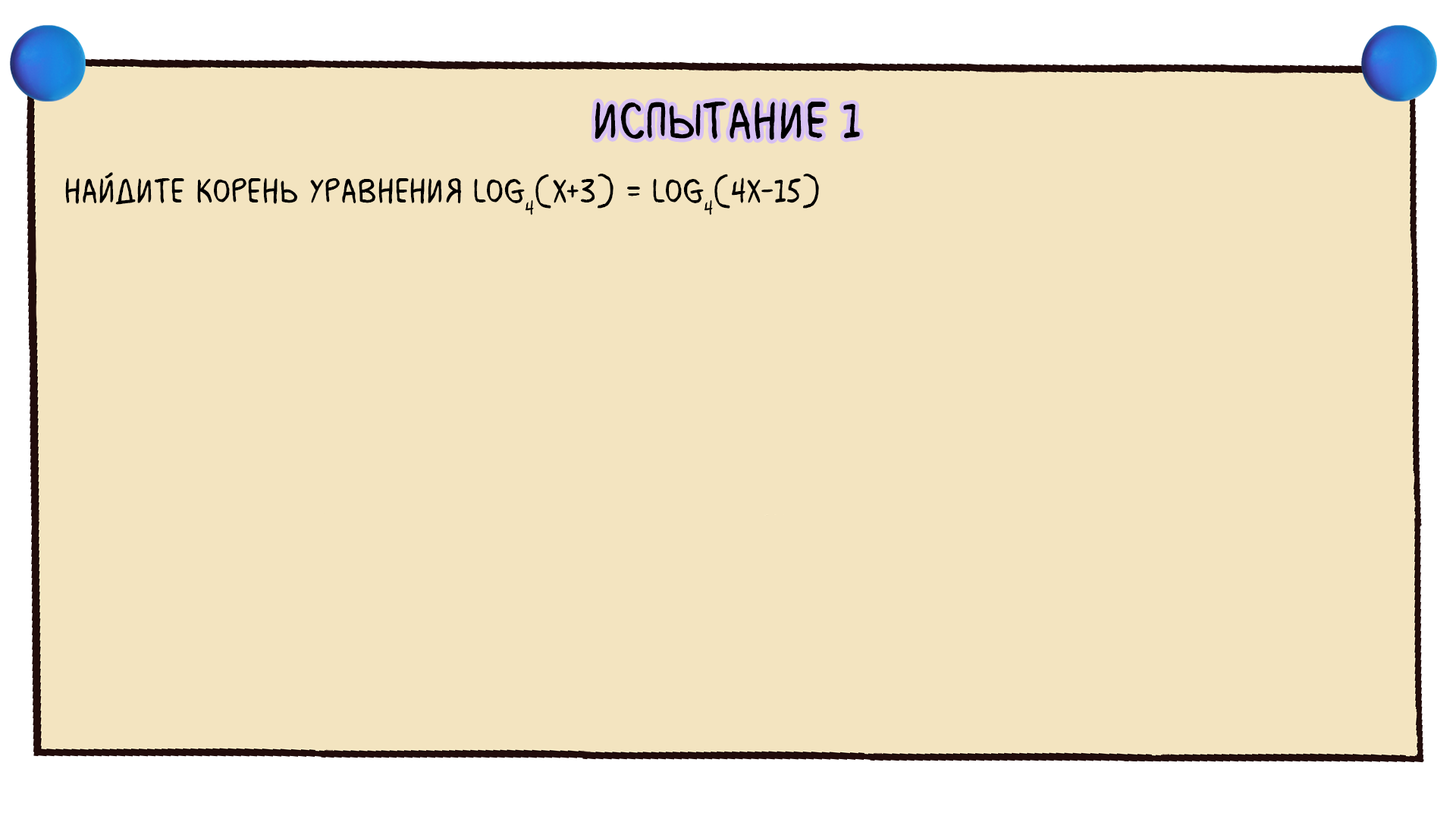
<style>
.page{position:relative;width:1456px;height:819px;background:#f3e4c0}
.page>*{position:absolute;margin:0}
.t1{font:54.6px "MilkMustacheBB";color:#000000}
.t2{font:36.4px "MilkMustacheBB";color:#000000}
.t3{font:36.4px "MilkMustacheBB";color:#000000;text-transform:uppercase}
</style>
<div class="page">
<p class="t1" style="left:595px;top:101px;width:265px;height:39px">испытание 1</p>
<p class="t2" style="left:65px;top:172px;width:754px;height:43px">Найдите корень уравнения log4<span class="t3">(x+3) = log4(4x-15)</span></p>
</div>
